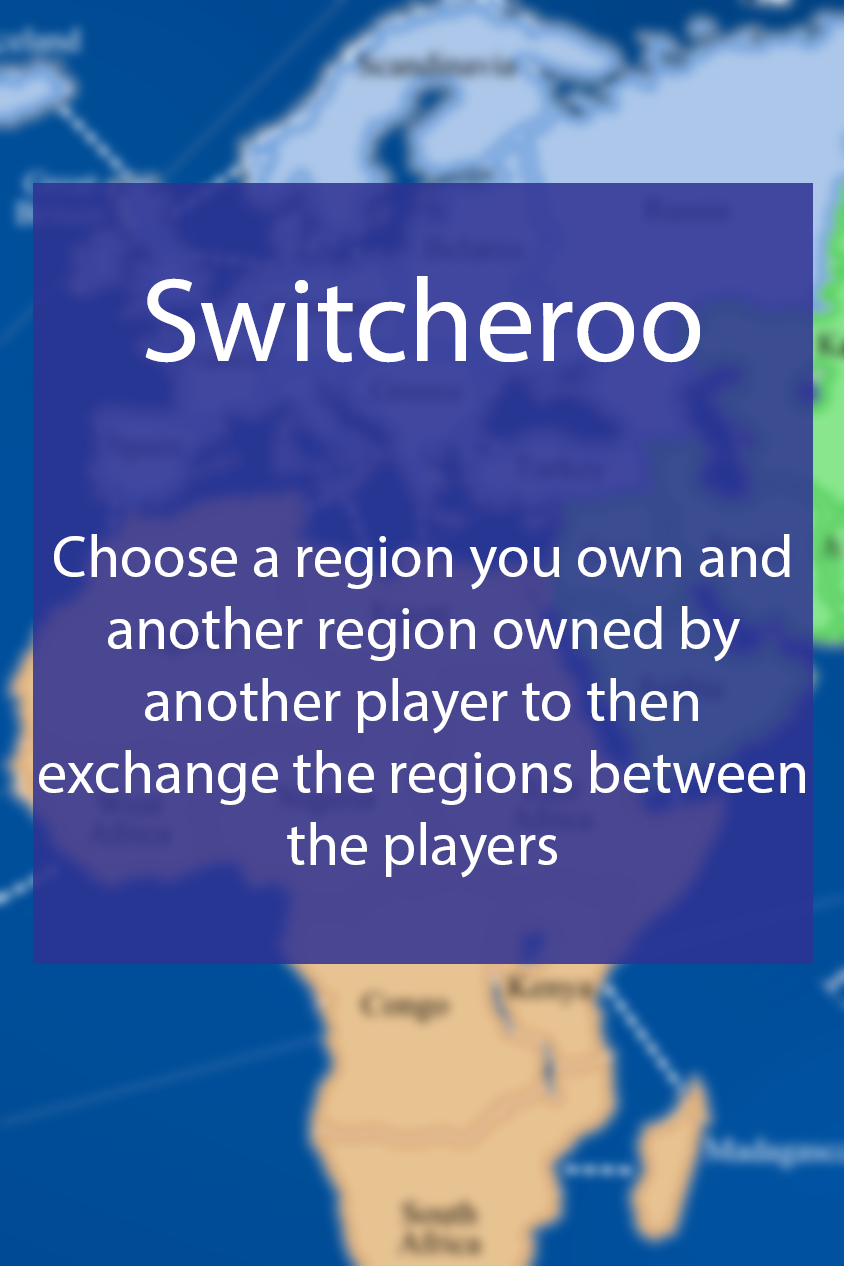
<style>
.page{position:relative;width:844px;height:1266px}
.page>*{position:absolute;margin:0}
.t1{font:60px "MyriadPro-Regular";color:#ffffff}
.t2{font:48px "MyriadPro-Regular";color:#ffffff}
.t3{font:120px "MyriadPro-Regular";color:#ffffff}
</style>
<div class="page">
<p class="t1" style="left:39px;top:276px;width:766px;height:602px;text-align:center"><span class="t2"><br></span><span class="t3">Switcheroo<br><br><br><br></span>Choose a region you own and another region owned by another player to then exchange the regions between the players</p>
</div>
